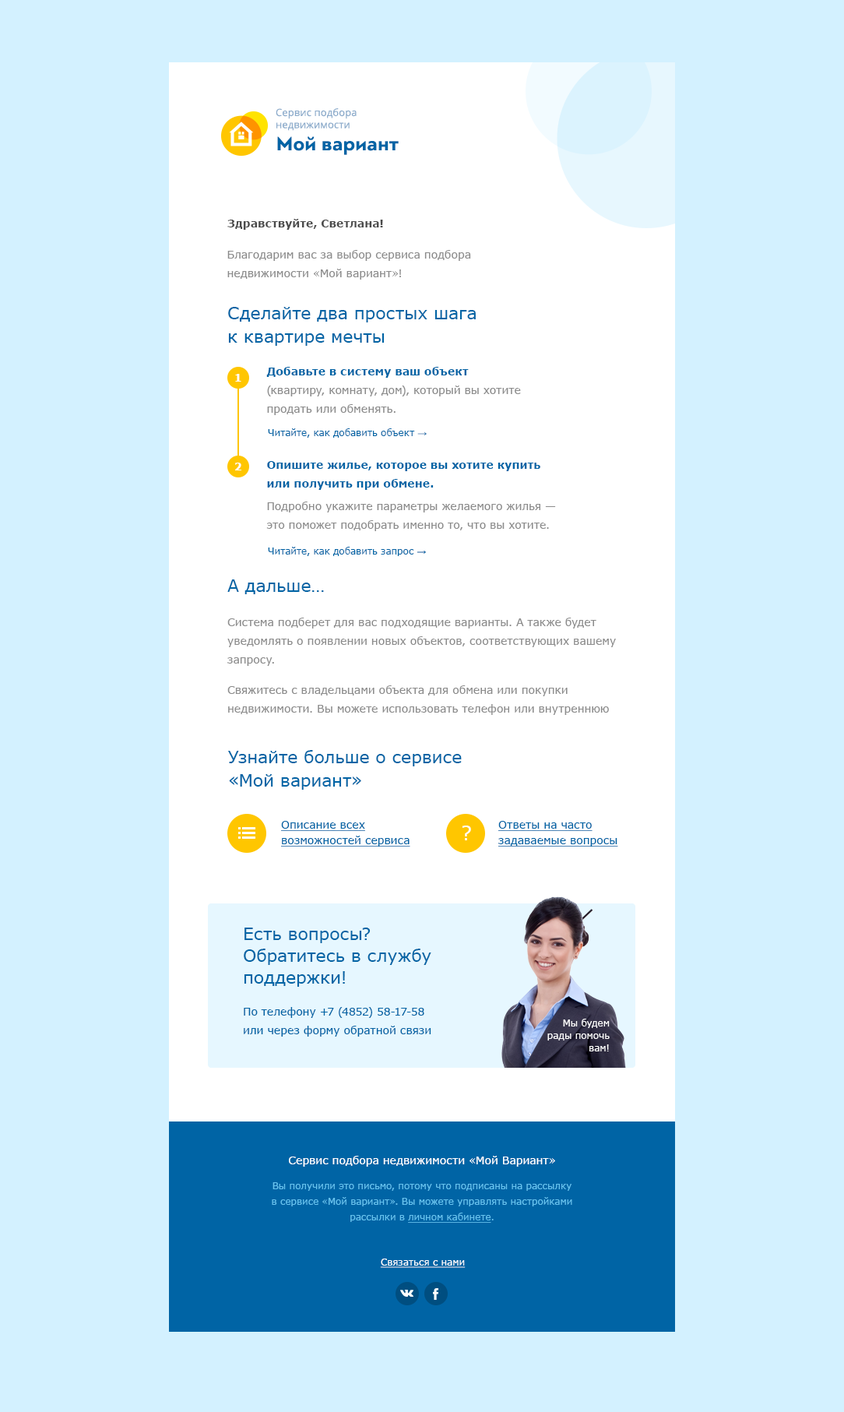
<style>
.page{position:relative;width:844px;height:1412px;background:#d3f1ff}
.page>*{position:absolute;margin:0}
.t1{font:10.1px "OpenSans";letter-spacing:0.01em;color:#8daccc}
.t2{font:20.3px "PFBagueSansPro-Bold";letter-spacing:0.01em;color:#0064a5}
.t3{font:10.9px "Verdana-Bold";color:#4b4b4b}
.t4{font:10.9px/18.7px "Verdana";color:#8c8c8c}
.t5{font:17.1px/23.4px "Verdana";color:#0064a5}
.t6{font:10.9px "Verdana-Bold";color:#ffffff}
.t7{font:10.9px "Verdana-Bold";color:#0064a5}
.t8{font:9.3px "Verdana";color:#0064a5}
.t9{font:9.3px "ArialMT";color:#0064a5}
.t10{font:10.9px/18.7px "Verdana-Bold";color:#0064a5}
.t11{font:17.1px "Verdana";color:#0064a5}
.t12{font:10.9px/15.6px "Verdana";color:#0064a5;text-decoration:underline}
.t13{font:20.3px "Verdana";color:#ffffff}
.t14{font:17.1px/21.8px "Verdana";color:#0064a5}
.t15{font:10.9px/18.7px "Verdana";color:#0064a5}
.t16{font:9.3px/12.5px "Verdana";color:#ffffff}
.t17{font:10.9px "Verdana";color:#ffffff}
.t18{font:9.3px/15.6px "Verdana";color:#66c3ef}
.t19{font:9.3px/15.6px "Verdana";color:#66c3ef;text-decoration:underline}
.t20{font:9.3px "Verdana";color:#ffffff;text-decoration:underline}
</style>
<div class="page">
<p class="t1" style="left:276px;top:108px;width:81px;height:23px">Сервис подбора<br>недвижимости</p>
<p class="t2" style="left:277px;top:136px;width:122px;height:19px">Мой вариант</p>
<p class="t3" style="left:227px;top:219px;width:156px;height:11px">Здравствуйте, Светлана!</p>
<p class="t4" style="left:227px;top:250px;width:244px;height:30px">Благодарим вас за выбор сервиса подбора недвижимости «Мой вариант»!</p>
<p class="t5" style="left:228px;top:307px;width:248px;height:39px">Сделайте два простых шага к квартире мечты</p>
<p class="t6" style="left:235px;top:374px;width:6px;height:8px">1</p>
<p class="t7" style="left:266px;top:367px;width:203px;height:11px">Добавьте в систему ваш объект</p>
<p class="t4" style="left:267px;top:386px;width:254px;height:29px">(квартиру, комнату, дом), который вы хотите продать или обменять.</p>
<p class="t8" style="left:268px;top:428px;width:159px;height:10px">Читайте, как добавить объект <span class="t9">→</span></p>
<p class="t10" style="left:267px;top:461px;width:274px;height:29px">Опишите жилье, которое вы хотите купить или получить при обмене.</p>
<p class="t6" style="left:235px;top:463px;width:6px;height:7px">2</p>
<p class="t4" style="left:266px;top:502px;width:290px;height:29px">Подробно укажите параметры желаемого жилья — это поможет подобрать именно то, что вы хотите.</p>
<p class="t8" style="left:268px;top:547px;width:158px;height:9px">Читайте, как добавить запрос <span class="t9">→</span></p>
<p class="t11" style="left:227px;top:580px;width:97px;height:14px">А дальше…</p>
<p class="t4" style="left:227px;top:618px;width:389px;height:97px">Система подберет для вас подходящие варианты. А также будет уведомлять о появлении новых объектов, соответствующих вашему запросу.<br>Свяжитесь с владельцами объекта для обмена или покупки недвижимости. Вы можете использовать телефон или внутреннюю систему сообщений.</p>
<p class="t5" style="left:228px;top:750px;width:234px;height:40px">Узнайте больше о сервисе «Мой вариант»</p>
<p class="t12" style="left:281px;top:821px;width:130px;height:26px">Описание всех<br>возможностей сервиса</p>
<p class="t12" style="left:499px;top:821px;width:119px;height:26px">Ответы на часто<br>задаваемые вопросы</p>
<p class="t13" style="left:463px;top:826px;width:8px;height:14px">?</p>
<p class="t14" style="left:244px;top:928px;width:188px;height:59px">Есть вопросы?<br>Обратитесь в службу поддержки!</p>
<p class="t15" style="left:244px;top:1007px;width:188px;height:30px">По телефону +7 (4852) 58-17-58 или через форму обратной связи</p>
<p class="t16" style="left:548px;top:1019px;width:62px;height:33px;text-align:right">Мы будем рады помочь вам!</p>
<p class="t17" style="left:289px;top:1156px;width:266px;height:11px">Сервис подбора недвижимости «Мой Вариант»</p>
<p class="t18" style="left:272px;top:1182px;width:301px;height:41px;text-align:center">Вы получили это письмо, потому что подписаны на рассылку в сервисе «Мой вариант». Вы можете управлять настройками рассылки в <span class="t19">личном кабинете</span>.</p>
<p class="t20" style="left:380px;top:1259px;width:86px;height:9px">Связаться с нами</p>
</div>
